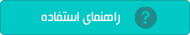
<style>
.page{position:relative;width:190px;height:35px;background:#00c9c6}
.page>*{position:absolute;margin:0}
.t1{font:15px "Mj_BeirutLtX3";color:#f1f2f2}
</style>
<div class="page">
<p class="t1" style="left:41px;top:11px;width:79px;height:14px">راهنمای استفاده</p>
</div>
